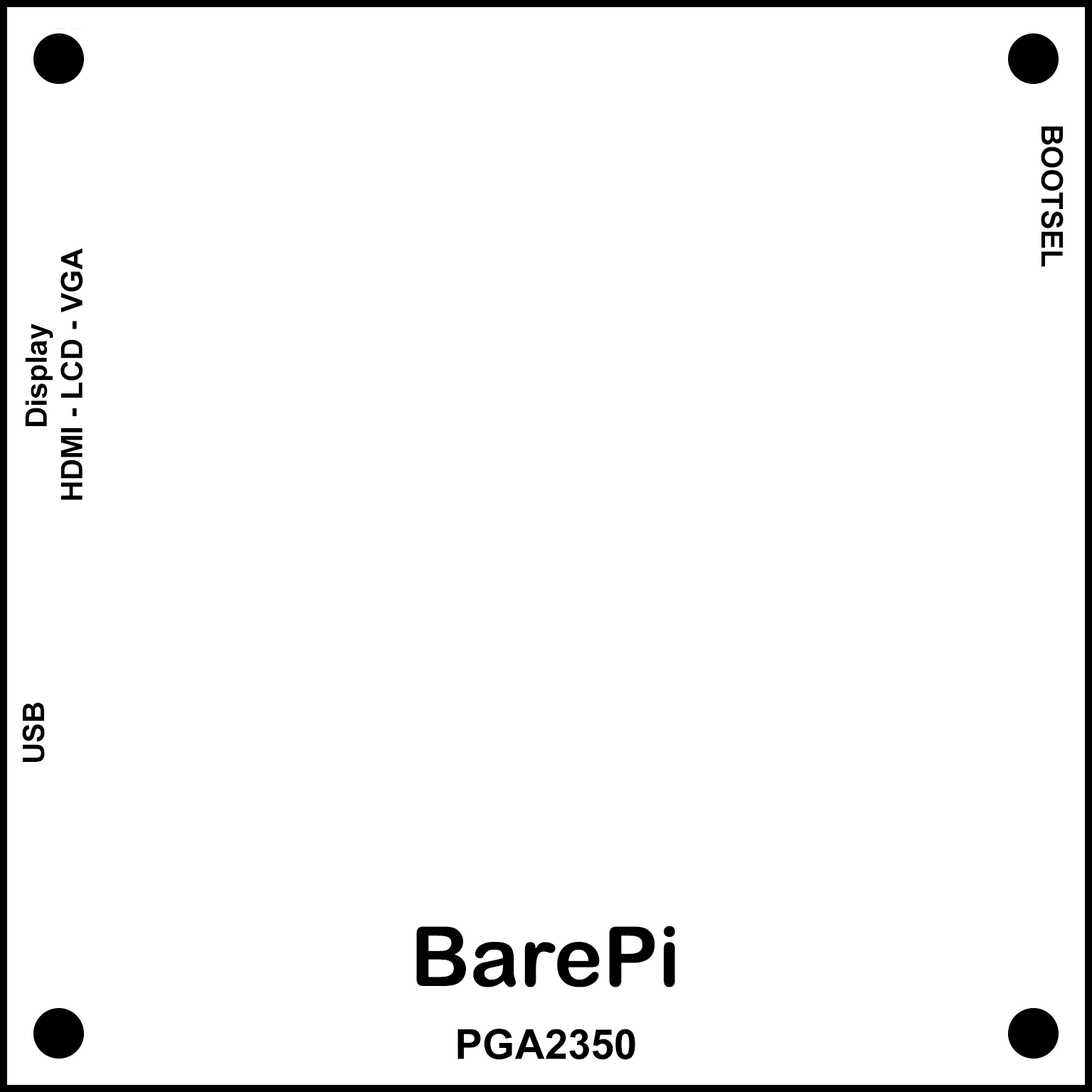
<style>
.page{position:relative;width:1092px;height:1092px;background:#ffffff}
.page>*{position:absolute;margin:0}
.t1{font:29.6px "Arial-BoldMT";color:#000000}
.t2{font:83px "ArialRoundedMTBold";color:#000000}
.t3{font:41.5px "Arial-BoldMT";color:#000000}
</style>
<div class="page">
<p class="t1" style="left:1041px;top:126px;width:23px;height:141px;rotate:90deg">BOOTSEL</p>
<p class="t1" style="left:25px;top:248px;width:58px;height:252px;text-align:center;rotate:-90deg">Display<br>HDMI - LCD - VGA</p>
<p class="t1" style="left:22px;top:702px;width:23px;height:60px;rotate:-90deg">USB</p>
<p class="t2" style="left:416px;top:926px;width:259px;height:61px">BarePi</p>
<p class="t3" style="left:457px;top:1029px;width:178px;height:31px">PGA2350</p>
</div>
